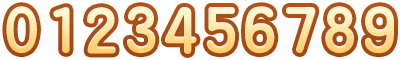
<style>
.page{position:relative;width:400px;height:60px;background:#ffffff}
.page>*{position:absolute;margin:0}
.t1{font:57.9px "FZY4JW--GB1-0";letter-spacing:0.1em}
</style>
<div class="page">
<p class="t1" style="left:6px;top:6px;width:31px;height:48px">0</p>
<p class="t1" style="left:127px;top:6px;width:29px;height:48px">3</p>
<p class="t1" style="left:245px;top:6px;width:30px;height:48px">6</p>
<p class="t1" style="left:325px;top:6px;width:29px;height:48px">8</p>
<p class="t1" style="left:365px;top:6px;width:29px;height:48px">9</p>
<p class="t1" style="left:53px;top:7px;width:17px;height:46px">1</p>
<p class="t1" style="left:87px;top:7px;width:29px;height:47px">2</p>
<p class="t1" style="left:165px;top:7px;width:32px;height:47px">4</p>
<p class="t1" style="left:206px;top:7px;width:30px;height:47px">5</p>
<p class="t1" style="left:286px;top:7px;width:30px;height:46px">7</p>
</div>
